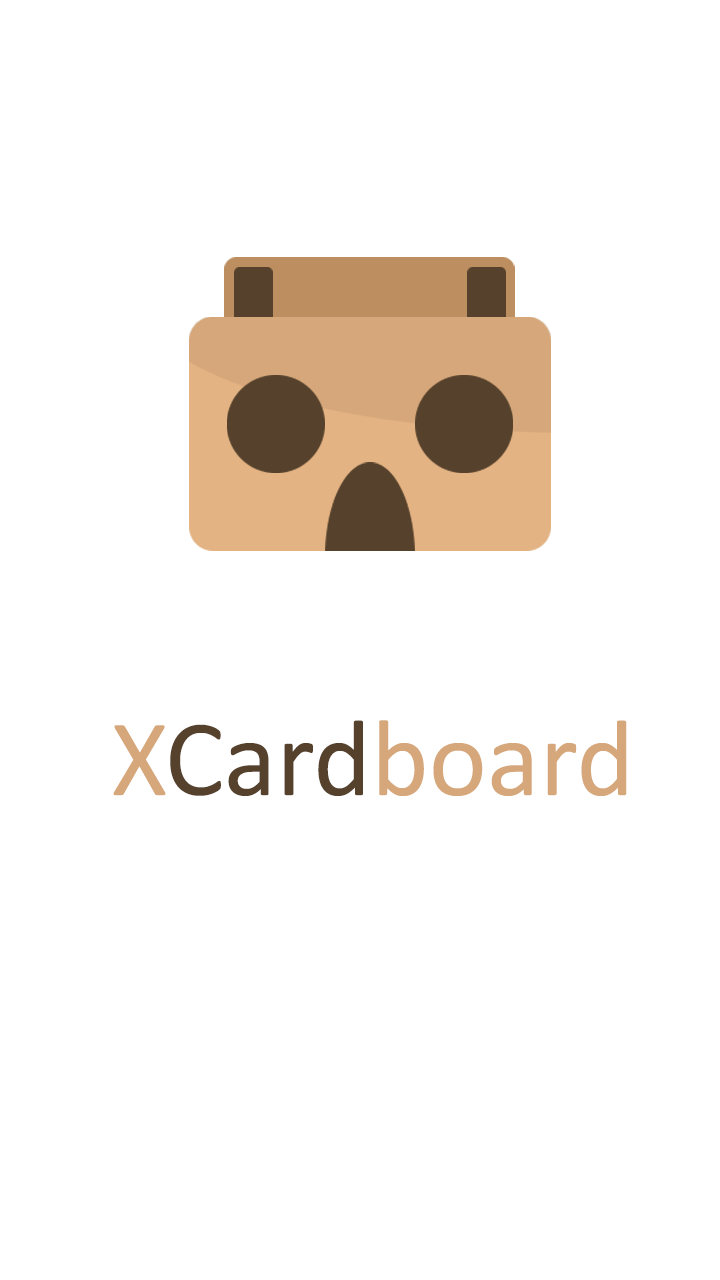
<style>
.page{position:relative;width:720px;height:1280px;background:#ffffff}
.page>*{position:absolute;margin:0}
.t1{font:110px "Calibri";color:#d6a77a}
.t2{font:110px "Calibri";color:#56422c}
</style>
<div class="page">
<p class="t1" style="left:113px;top:720px;width:514px;height:76px">X<span class="t2">Card</span>board</p>
</div>
